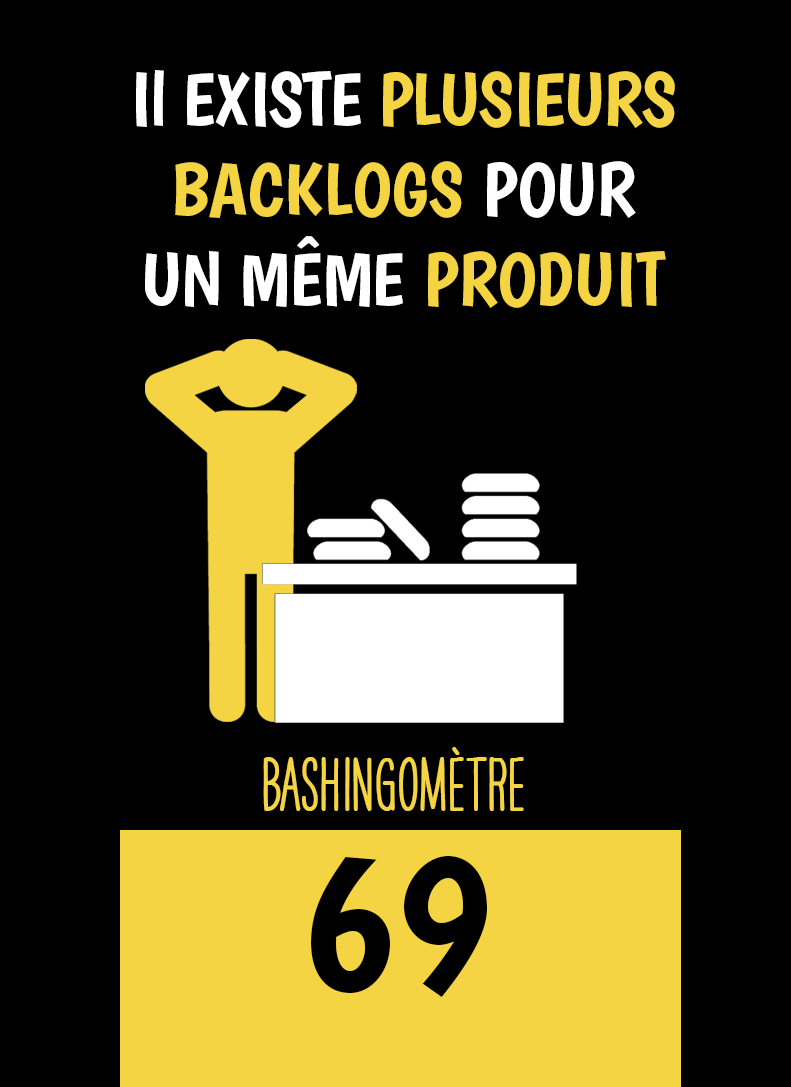
<style>
.page{position:relative;width:791px;height:1087px;background:#000000}
.page>*{position:absolute;margin:0}
.t1{font:75px "Boogaloo-Regular";color:#ffffff}
.t2{font:75px "Boogaloo-Regular";letter-spacing:-0.02em;color:#ffffff}
.t3{font:75px "Boogaloo-Regular";letter-spacing:-0.02em;color:#f4d443}
.t4{font:75px "Boogaloo-Regular";color:#f4d443}
.t5{font:66.7px "HAVEANICEDAYTallW04-Bold";color:#f4d443}
.t6{font:200px "Boogaloo-Regular";color:#000000}
</style>
<div class="page">
<p class="t1" style="left:136px;top:70px;width:539px;height:238px;text-align:center"><span class="t2">Il EXISTE </span><span class="t3">PLUSIEURS</span><span class="t4"> BACKLOGS</span> POUR UN MÊME <span class="t4">PRODUIT</span></p>
<p class="t5" style="left:263px;top:747px;width:261px;height:64px">BASHINgomètre</p>
<p class="t6" style="left:311px;top:856px;width:176px;height:141px">69</p>
</div>
